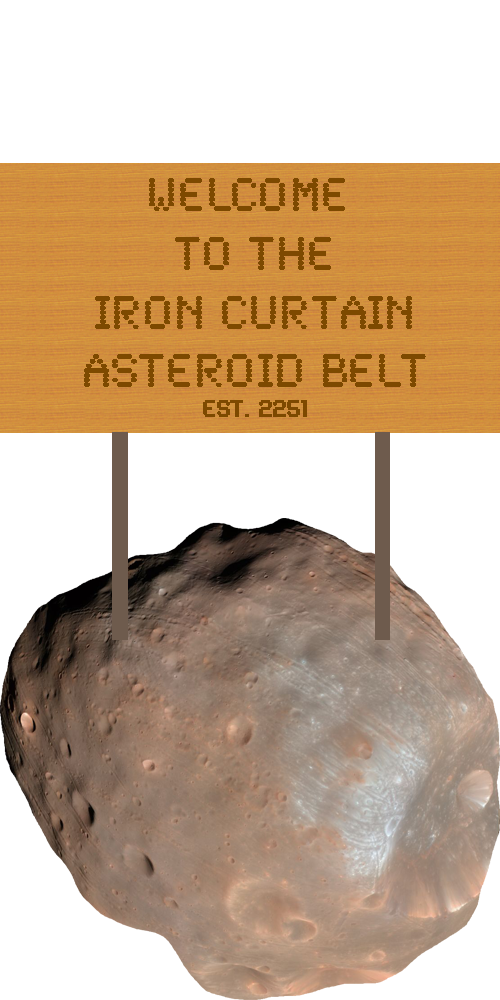
<style>
.page{position:relative;width:500px;height:1000px;background:#ffffff}
.page>*{position:absolute;margin:0}
.t1{font:49px "SynchroLET";color:#7d4900}
.t2{font:24px "SynchroLET";color:#7d4900;font-weight:bold}
</style>
<div class="page">
<p class="t1" style="left:84px;top:178px;width:342px;height:239px;text-align:center">WELCOME <br>TO THE<br>IRON CURTAIN<br>ASTEROID BELT<br><span class="t2">EST. 2251</span></p>
</div>
